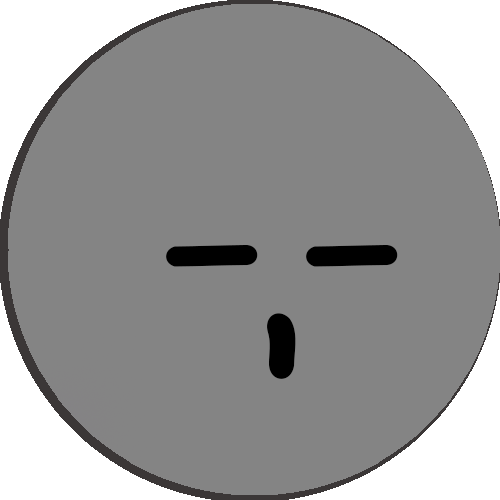
<style>
.page{position:relative;width:500px;height:500px;background:#848484}
.page>*{position:absolute;margin:0}
.t1{font:250px "DKGrumpyTiger-Regular";color:#000000}
</style>
<div class="page">
<p class="t1" style="left:166px;top:245px;width:232px;height:134px">-,-</p>
</div>
